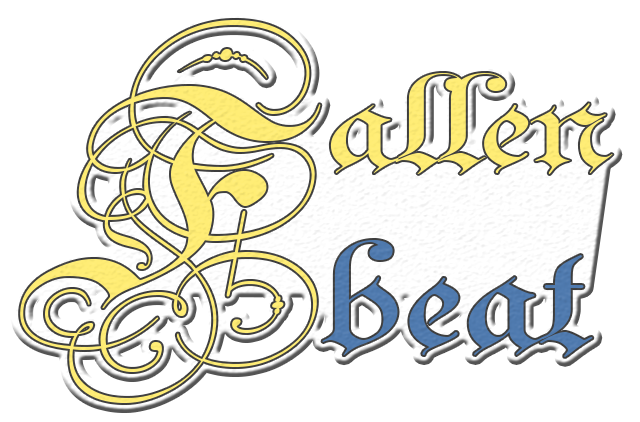
<style>
.page{position:relative;width:640px;height:422px;background:#ffffff}
.page>*{position:absolute;margin:0}
.t1{font:455px "Parchment-Regular";color:#ffed74}
.t2{font:230.1px "Parchment-Regular";color:#ffed74;scale:1.45 1}
.t3{font:263.2px "Parchment-Regular";color:#4f7aaf;scale:1.4 1}
</style>
<div class="page">
<p class="t1" style="left:20px;top:20px;width:301px;height:383px">F</p>
<p class="t2" style="left:330px;top:73px;width:283px;height:101px">allen</p>
<p class="t3" style="left:322px;top:240px;width:271px;height:117px">beat</p>
</div>
